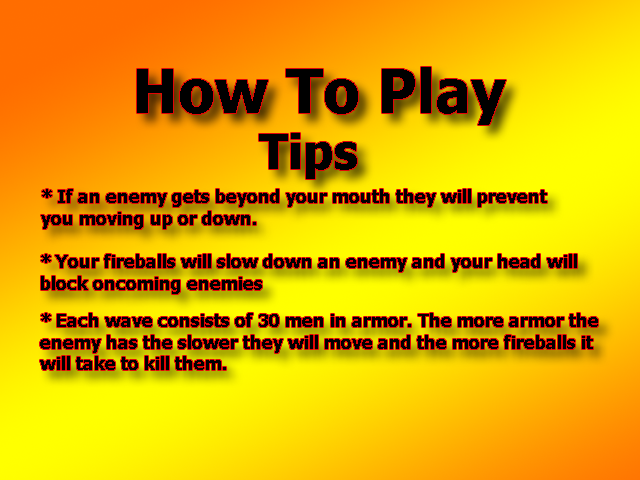
<style>
.page{position:relative;width:640px;height:480px}
.page>*{position:absolute;margin:0}
.t1{font:60px "Tahoma-Bold";color:#000000}
.t2{font:48px "Tahoma-Bold";color:#000000}
.t3{font:18px "Tahoma-Bold";color:#000000}
</style>
<div class="page">
<p class="t1" style="left:137px;top:67px;width:369px;height:58px">How To Play</p>
<p class="t2" style="left:259px;top:133px;width:98px;height:46px">Tips</p>
<p class="t3" style="left:41px;top:189px;width:506px;height:40px">* If an enemy gets beyond your mouth they will prevent<br>you moving up or down.</p>
<p class="t3" style="left:41px;top:254px;width:536px;height:40px">* Your fireballs will slow down an enemy and your head will<br>block oncoming enemies</p>
<p class="t3" style="left:40px;top:313px;width:558px;height:57px">* Each wave consists of 30 men in armor. The more armor the<br>enemy has the slower they will move and the more fireballs it<br>will take to kill them.</p>
</div>
